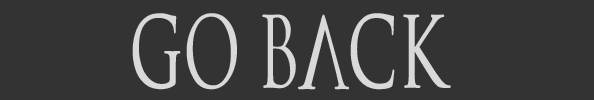
<style>
.page{position:relative;width:594px;height:100px;background:#333333}
.page>*{position:absolute;margin:0}
.t1{font:95.5px "SpaceandAstronomy";color:#d9d9d9;scale:0.66 1}
</style>
<div class="page">
<p class="t1" style="left:132px;top:13px;width:319px;height:77px">Go Back</p>
</div>
